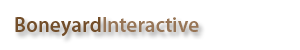
<style>
.page{position:relative;width:300px;height:50px;background:#ffffff}
.page>*{position:absolute;margin:0}
.t1{font:21px "MyriadPro-Semibold";color:#977556}
.t2{font:21px "MyriadPro-Semibold";color:#734e2a}
</style>
<div class="page">
<p class="t1" style="left:15px;top:17px;width:184px;height:20px"><span class="t2">Boneyard</span>Interactive</p>
</div>
